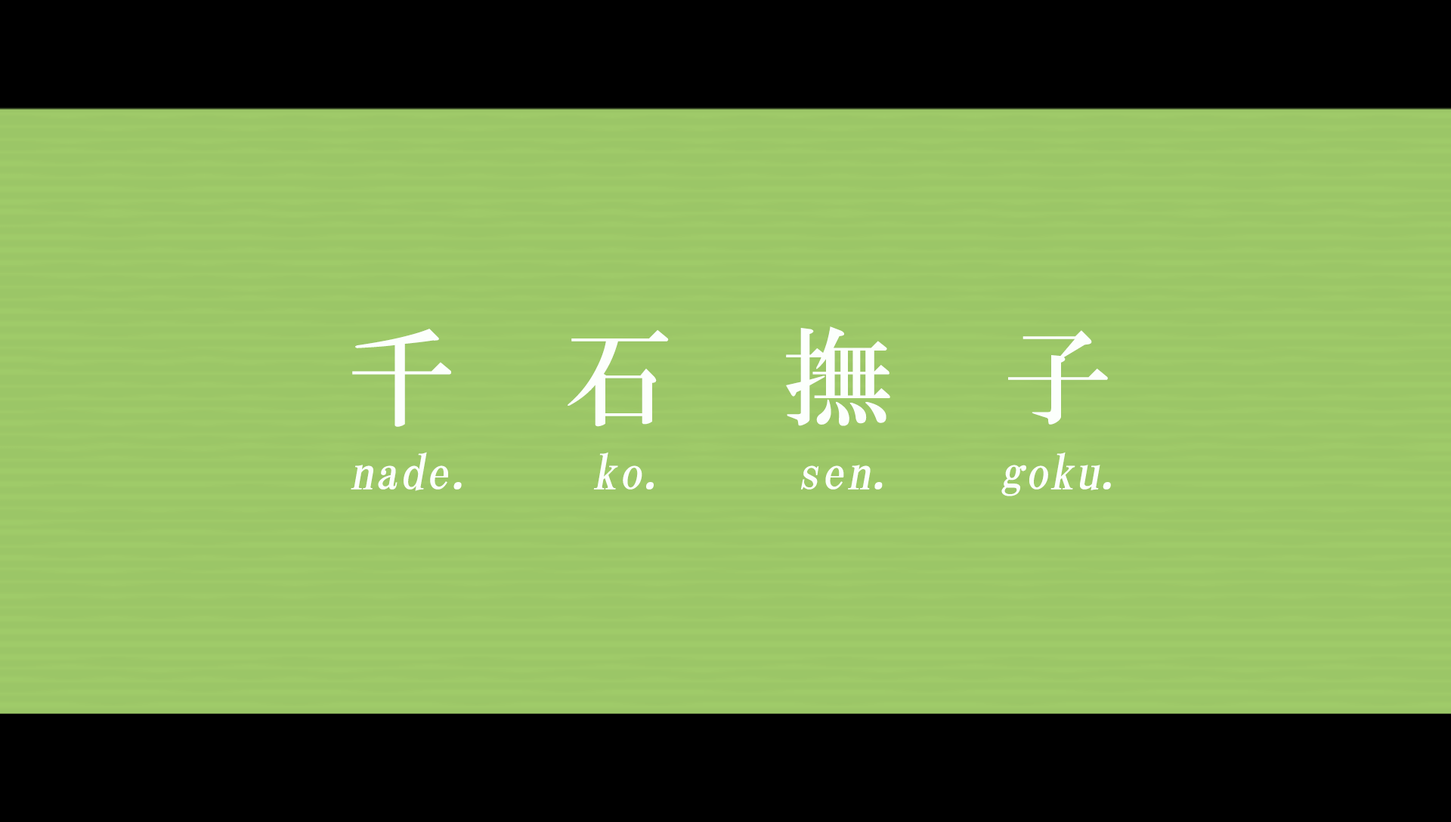
<style>
.page{position:relative;width:1451px;height:822px;background:#9bc667}
.page>*{position:absolute;margin:0}
.t1{font:108.8px "HGMinchoB";letter-spacing:1.01em;color:#fcfffc}
.t2{font:48.4px "HGMinchoB";letter-spacing:0.025em;color:#fcfffc;font-style:italic}
</style>
<div class="page">
<p class="t1" style="left:352px;top:326px;width:756px;height:101px">千石撫子</p>
<p class="t2" style="left:351px;top:452px;width:760px;height:44px">nade.     ko.     sen.    goku.</p>
</div>
